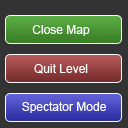
<style>
.page{position:relative;width:128px;height:128px;background:#333333}
.page>*{position:absolute;margin:0}
.t1{font:12px "ArialMT";color:#ffffff}
</style>
<div class="page">
<p class="t1" style="left:32px;top:25px;width:58px;height:11px">Close Map</p>
<p class="t1" style="left:34px;top:64px;width:54px;height:10px">Quit Level</p>
<p class="t1" style="left:22px;top:102px;width:84px;height:11px">Spectator Mode</p>
</div>
